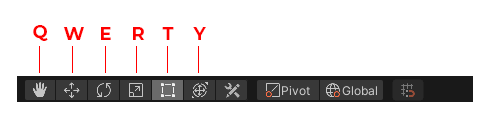
<style>
.page{position:relative;width:496px;height:125px;background:#ffffff}
.page>*{position:absolute;margin:0}
.t1{font:18px "Montserrat-Bold";color:#fe0000}
</style>
<div class="page">
<p class="t1" style="left:33px;top:25px;width:15px;height:16px">Q</p>
<p class="t1" style="left:63px;top:27px;width:21px;height:13px">W</p>
<p class="t1" style="left:101px;top:27px;width:10px;height:13px">E</p>
<p class="t1" style="left:133px;top:27px;width:12px;height:13px">R</p>
<p class="t1" style="left:162px;top:27px;width:12px;height:13px">T</p>
<p class="t1" style="left:193px;top:27px;width:13px;height:13px">Y</p>
</div>
